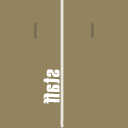
<style>
.page{position:relative;width:128px;height:128px;background:#92845f}
.page>*{position:absolute;margin:0}
.t1{font:19.3px "Compacta";color:#ffffff;scale:1.38 1}
</style>
<div class="page">
<p class="t1" style="left:43px;top:69px;width:17px;height:35px;rotate:90deg">staff</p>
</div>
